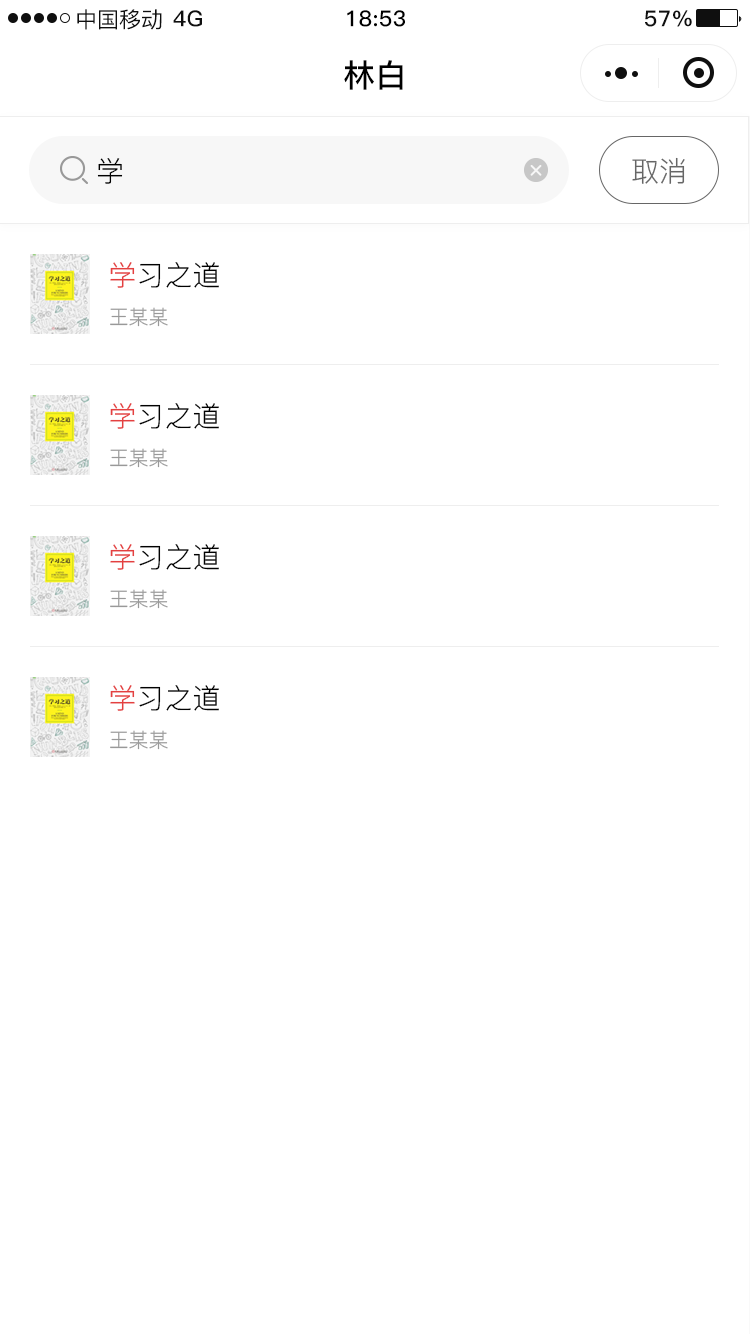
<style>
.page{position:relative;width:750px;height:1334px;background:#ffffff}
.page>*{position:absolute;margin:0}
.t1{font:22px "PingFang-SC-Medium";color:#0f0f0f}
.t2{font:22px "PingFang-SC-Bold";letter-spacing:0.025em;color:#0f0f0f}
.t3{font:22px "PingFang-SC-Bold";letter-spacing:0.025em;color:#000000}
.t4{font:32px "PingFang-SC-Bold";color:#000000}
.t5{font:28px "PingFang-SC-Regular";color:#000000}
.t6{font:28px "PingFang-SC-Regular";color:#666666}
.t7{font:28px "PingFang-SC-Regular";color:#010101}
.t8{font:28px "PingFang-SC-Regular";color:#e44040}
.t9{font:20px "PingFang-SC-Regular";color:#999999}
</style>
<div class="page">
<p class="t1" style="left:77px;top:9px;width:85px;height:21px">中国移动</p>
<p class="t2" style="left:173px;top:10px;width:29px;height:17px">4G</p>
<p class="t3" style="left:347px;top:10px;width:58px;height:17px">18:53</p>
<p class="t2" style="left:645px;top:10px;width:47px;height:17px">57%</p>
<p class="t4" style="left:344px;top:60px;width:59px;height:30px">林白</p>
<p class="t5" style="left:97px;top:158px;width:26px;height:26px">学</p>
<p class="t6" style="left:632px;top:157px;width:53px;height:27px">取消</p>
<p class="t7" style="left:110px;top:262px;width:109px;height:26px"><span class="t8">学</span>习之道</p>
<p class="t9" style="left:110px;top:307px;width:58px;height:20px">王某某</p>
<p class="t7" style="left:110px;top:403px;width:109px;height:26px"><span class="t8">学</span>习之道</p>
<p class="t9" style="left:110px;top:448px;width:58px;height:20px">王某某</p>
<p class="t7" style="left:110px;top:544px;width:109px;height:26px"><span class="t8">学</span>习之道</p>
<p class="t9" style="left:110px;top:589px;width:58px;height:20px">王某某</p>
<p class="t7" style="left:110px;top:685px;width:109px;height:26px"><span class="t8">学</span>习之道</p>
<p class="t9" style="left:110px;top:730px;width:58px;height:20px">王某某</p>
</div>
